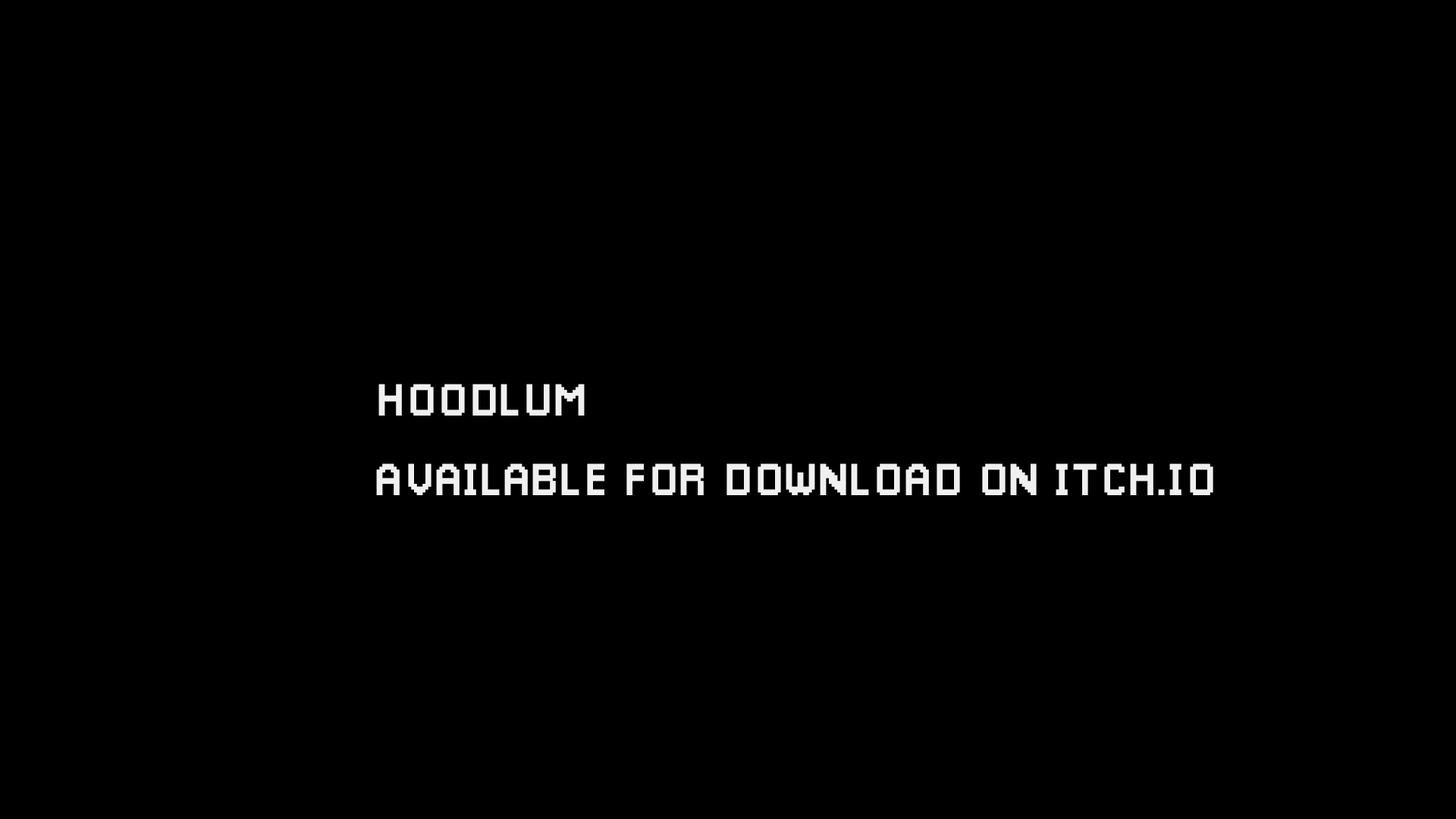
<style>
.page{position:relative;width:1456px;height:819px;background:#000000}
.page>*{position:absolute;margin:0}
.t1{font:45.5px "Pixellari";color:#f0f0f0}
</style>
<div class="page">
<p class="t1" style="left:378px;top:384px;width:207px;height:32px">HOODLUM</p>
<p class="t1" style="left:376px;top:463px;width:837px;height:32px">AVAILABLE FOR DOWNLOAD ON ITCH.IO</p>
</div>
